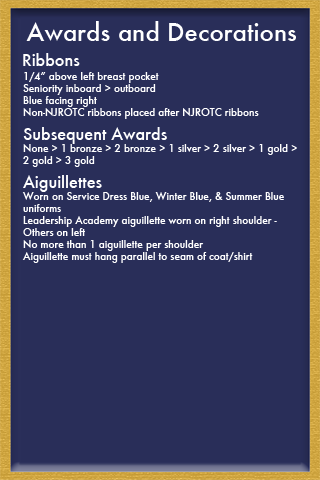
<style>
.page{position:relative;width:320px;height:480px;background:#292e59}
.page>*{position:absolute;margin:0}
.t1{font:24px "Futura-Medium";color:#ffffff}
.t2{font:16px "Futura-Medium";color:#ffffff}
.t3{font:10px "Futura-Medium";color:#ffffff}
</style>
<div class="page">
<p class="t1" style="left:26px;top:21px;width:270px;height:20px">Awards and Decorations</p>
<p class="t2" style="left:23px;top:53px;width:57px;height:13px">Ribbons</p>
<p class="t3" style="left:22px;top:72px;width:275px;height:191px">1/4” above left breast pocket<br>Seniority inboard &gt; outboard<br>Blue facing right<br>Non-NJROTC ribbons placed after NJROTC ribbons<br><br><br>None &gt; 1 bronze &gt; 2 bronze &gt; 1 silver &gt; 2 silver &gt; 1 gold &gt;<br>2 gold &gt; 3 gold<br><br><br>Worn on Service Dress Blue, Winter Blue, &amp; Summer Blue <br>uniforms<br>Leadership Academy aiguillette worn on right shoulder - <br>Others on left<br>No more than 1 aiguillette per shoulder<br>Aiguillette must hang parallel to seam of coat/shirt</p>
<p class="t2" style="left:23px;top:127px;width:144px;height:17px">Subsequent Awards</p>
<p class="t2" style="left:23px;top:175px;width:79px;height:17px">Aiguillettes</p>
</div>
